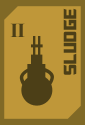
<style>
.page{position:relative;width:85px;height:125px;background:#bf9739}
.page>*{position:absolute;margin:0}
.t1{font:20px "TransformersMovie";letter-spacing:0.04em;color:#4c3f17}
.t2{font:20px "TimesNewRomanPS-BoldMT";letter-spacing:-0.04em;color:#4c3f17}
</style>
<div class="page">
<p class="t1" style="left:63px;top:8px;width:14px;height:67px;rotate:-90deg">sludge</p>
<p class="t2" style="left:10px;top:23px;width:15px;height:14px">II</p>
</div>
